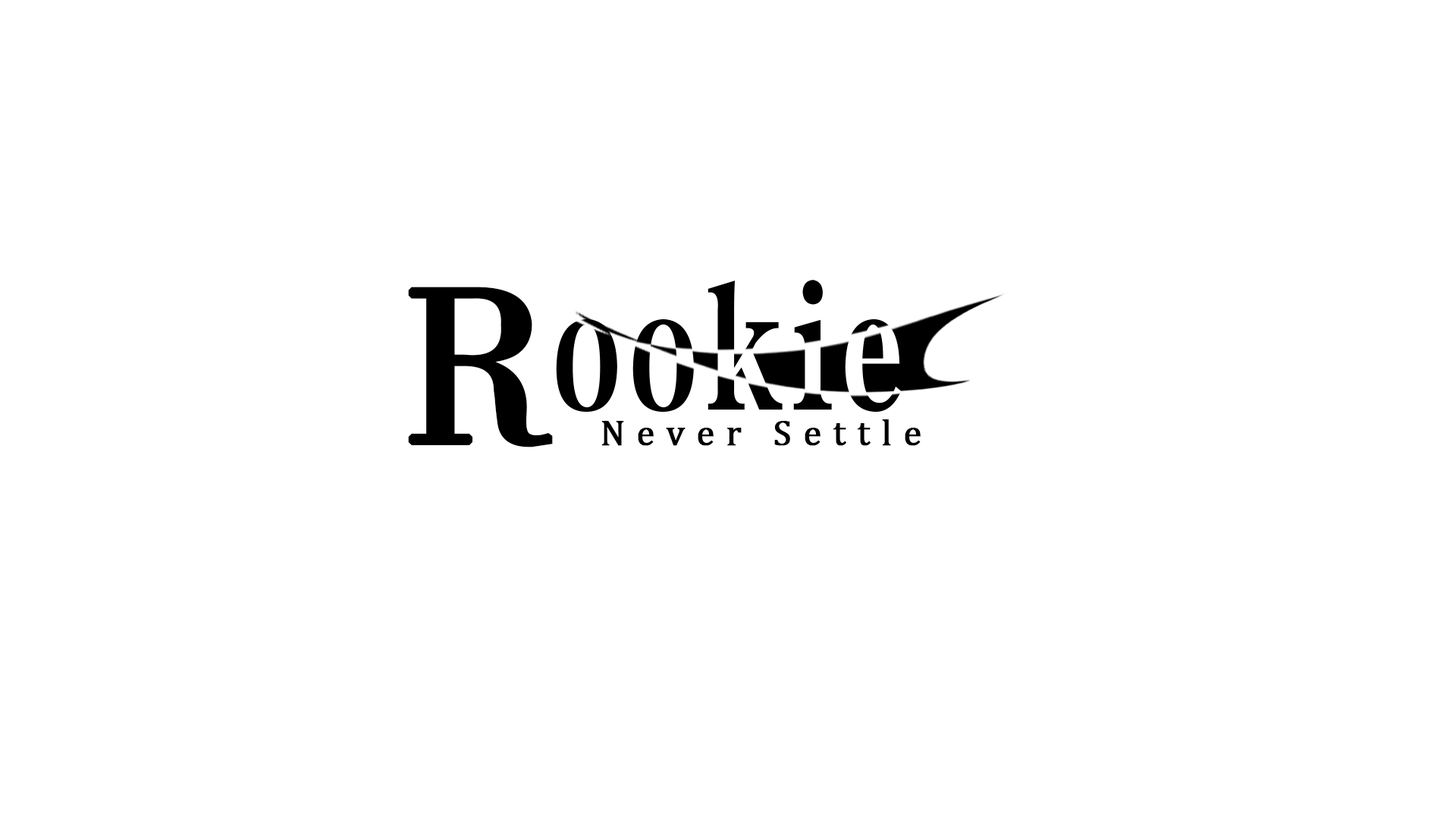
<style>
.page{position:relative;width:1456px;height:819px;background:#ffffff}
.page>*{position:absolute;margin:0}
.t1{font:227.5px "FZSSJW--GB1-0";letter-spacing:0.3em;color:#000000;font-weight:bold}
.t2{font:36.4px "Cambria";letter-spacing:0.3em;color:#000000;font-weight:bold}
</style>
<div class="page">
<p class="t1" style="left:408px;top:287px;width:145px;height:160px">R</p>
<p class="t2" style="left:601px;top:419px;width:320px;height:27px">Never Settle</p>
</div>
